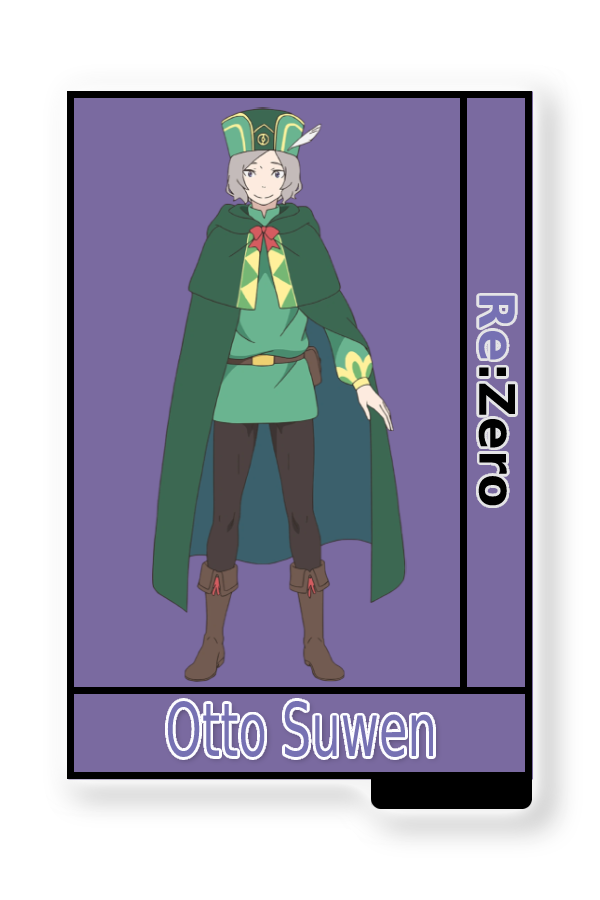
<style>
.page{position:relative;width:600px;height:900px;background:#7a6aa0}
.page>*{position:absolute;margin:0}
.t1{font:48.8px "MADETOMMY-Bold";color:#000000}
.t2{font:48.8px "MADETOMMY-Bold";color:#7671b3}
.t3{font:74.1px "CoolveticaRg-Regular";color:#7671b3;scale:0.63 1}
</style>
<div class="page">
<p class="t1" style="left:478px;top:295px;width:37px;height:211px;rotate:90deg"><span class="t2">Re</span>:Zero</p>
<p class="t3" style="left:167px;top:701px;width:266px;height:56px">Otto Suwen</p>
</div>
